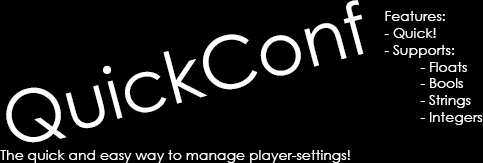
<style>
.page{position:relative;width:483px;height:163px;background:#000000}
.page>*{position:absolute;margin:0}
.t1{font:72px "CenturyGothic";color:#ffffff}
.t2{font:14px "CenturyGothic";color:#ffffff}
</style>
<div class="page">
<p class="t1" style="left:6px;top:0px;width:358px;height:143px;rotate:-15deg">QuickConf</p>
<p class="t2" style="left:384px;top:11px;width:99px;height:114px">Features:<br>- Quick!<br>- Supports:<br> - Floats<br> - Bools<br> - Strings<br> - Integers</p>
<p class="t2" style="left:0px;top:150px;width:350px;height:13px">The quick and easy way to manage player-settings!</p>
</div>
